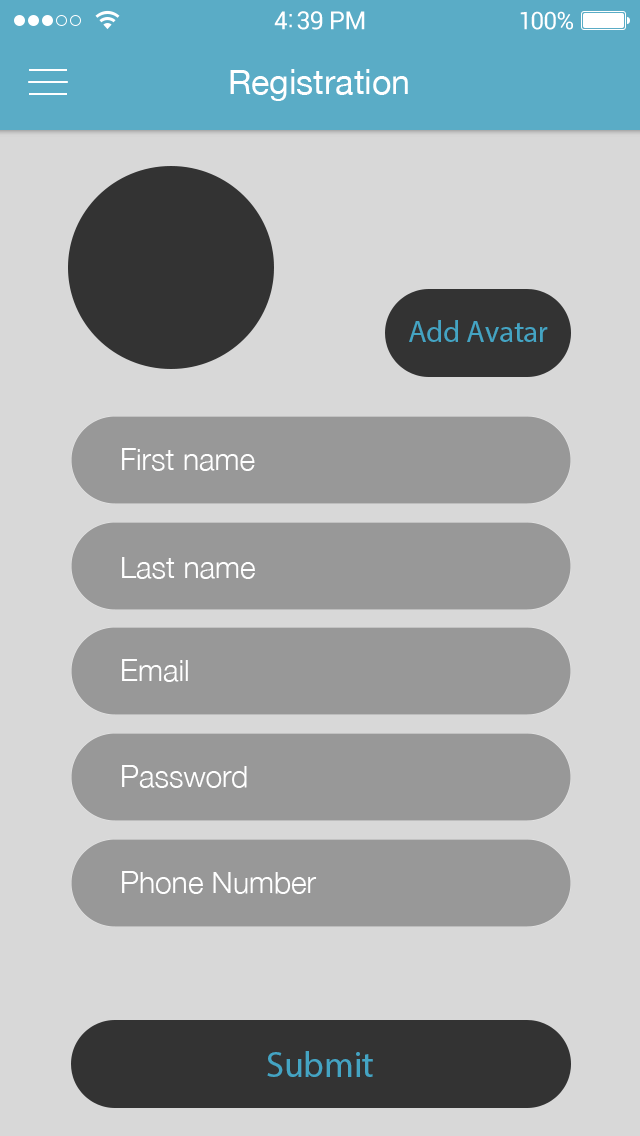
<style>
.page{position:relative;width:640px;height:1136px;background:#d8d8d8}
.page>*{position:absolute;margin:0}
.t1{font:34px "HelveticaNeue";color:#ffffff}
.t2{font:30.6px "MyriadPro-Regular";color:#44a4c3}
.t3{font:30px "HelveticaNeue-Light";color:#fffefe}
.t4{font:30px "HelveticaNeue-Light";color:#ffffff}
.t5{font:36px "MyriadPro-Regular";color:#44a4c3}
</style>
<div class="page">
<p class="t1" style="left:230px;top:69px;width:178px;height:32px">Registration</p>
<p class="t2" style="left:409px;top:320px;width:139px;height:22px">Add Avatar</p>
<p class="t3" style="left:122px;top:448px;width:133px;height:23px">First name</p>
<p class="t4" style="left:122px;top:557px;width:133px;height:22px">Last name</p>
<p class="t4" style="left:122px;top:659px;width:66px;height:23px">Email</p>
<p class="t3" style="left:122px;top:765px;width:125px;height:23px">Password</p>
<p class="t4" style="left:122px;top:871px;width:195px;height:23px">Phone Number</p>
<p class="t5" style="left:267px;top:1051px;width:106px;height:26px">Submit</p>
</div>
